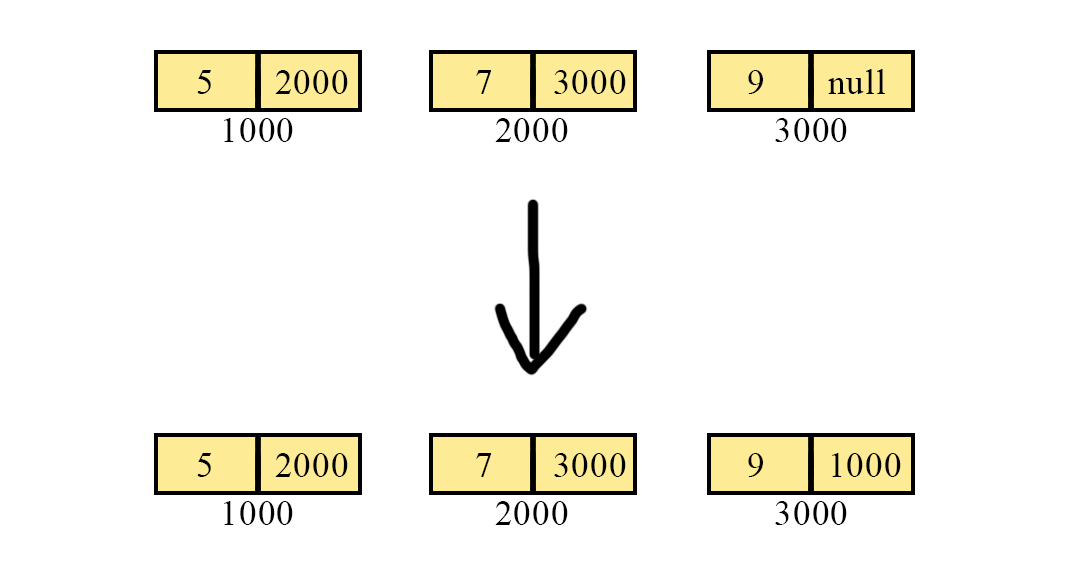
<style>
.page{position:relative;width:1080px;height:584px;background:#ffffff}
.page>*{position:absolute;margin:0}
.t1{font:35px "TimesNewRomanPSMT";letter-spacing:0.04em;color:#000000}
</style>
<div class="page">
<p class="t1" style="left:197px;top:70px;width:14px;height:24px">5</p>
<p class="t1" style="left:275px;top:70px;width:73px;height:24px">2000</p>
<p class="t1" style="left:476px;top:70px;width:15px;height:24px">7</p>
<p class="t1" style="left:554px;top:70px;width:72px;height:24px">3000</p>
<p class="t1" style="left:748px;top:70px;width:15px;height:24px">9</p>
<p class="t1" style="left:828px;top:69px;width:57px;height:25px">null</p>
<p class="t1" style="left:224px;top:118px;width:69px;height:24px">1000</p>
<p class="t1" style="left:495px;top:118px;width:73px;height:24px">2000</p>
<p class="t1" style="left:775px;top:118px;width:72px;height:24px">3000</p>
<p class="t1" style="left:197px;top:453px;width:14px;height:24px">5</p>
<p class="t1" style="left:275px;top:453px;width:73px;height:24px">2000</p>
<p class="t1" style="left:476px;top:453px;width:15px;height:24px">7</p>
<p class="t1" style="left:554px;top:453px;width:72px;height:24px">3000</p>
<p class="t1" style="left:748px;top:453px;width:15px;height:24px">9</p>
<p class="t1" style="left:832px;top:453px;width:69px;height:24px">1000</p>
<p class="t1" style="left:224px;top:501px;width:69px;height:24px">1000</p>
<p class="t1" style="left:495px;top:501px;width:73px;height:24px">2000</p>
<p class="t1" style="left:775px;top:501px;width:72px;height:24px">3000</p>
</div>
